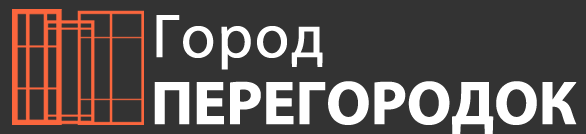
<style>
.page{position:relative;width:586px;height:134px;background:#333333}
.page>*{position:absolute;margin:0}
.t1{font:62px "MyriadPro-Regular";letter-spacing:0.01em;color:#ffffff;font-weight:bold}
.t2{font:62px "MyriadPro-Bold";letter-spacing:-0.025em;color:#ffffff;font-weight:bold}
</style>
<div class="page">
<p class="t1" style="left:156px;top:15px;width:167px;height:55px">Город</p>
<p class="t2" style="left:154px;top:81px;width:423px;height:54px">ПЕРЕГОРОДОК</p>
</div>
